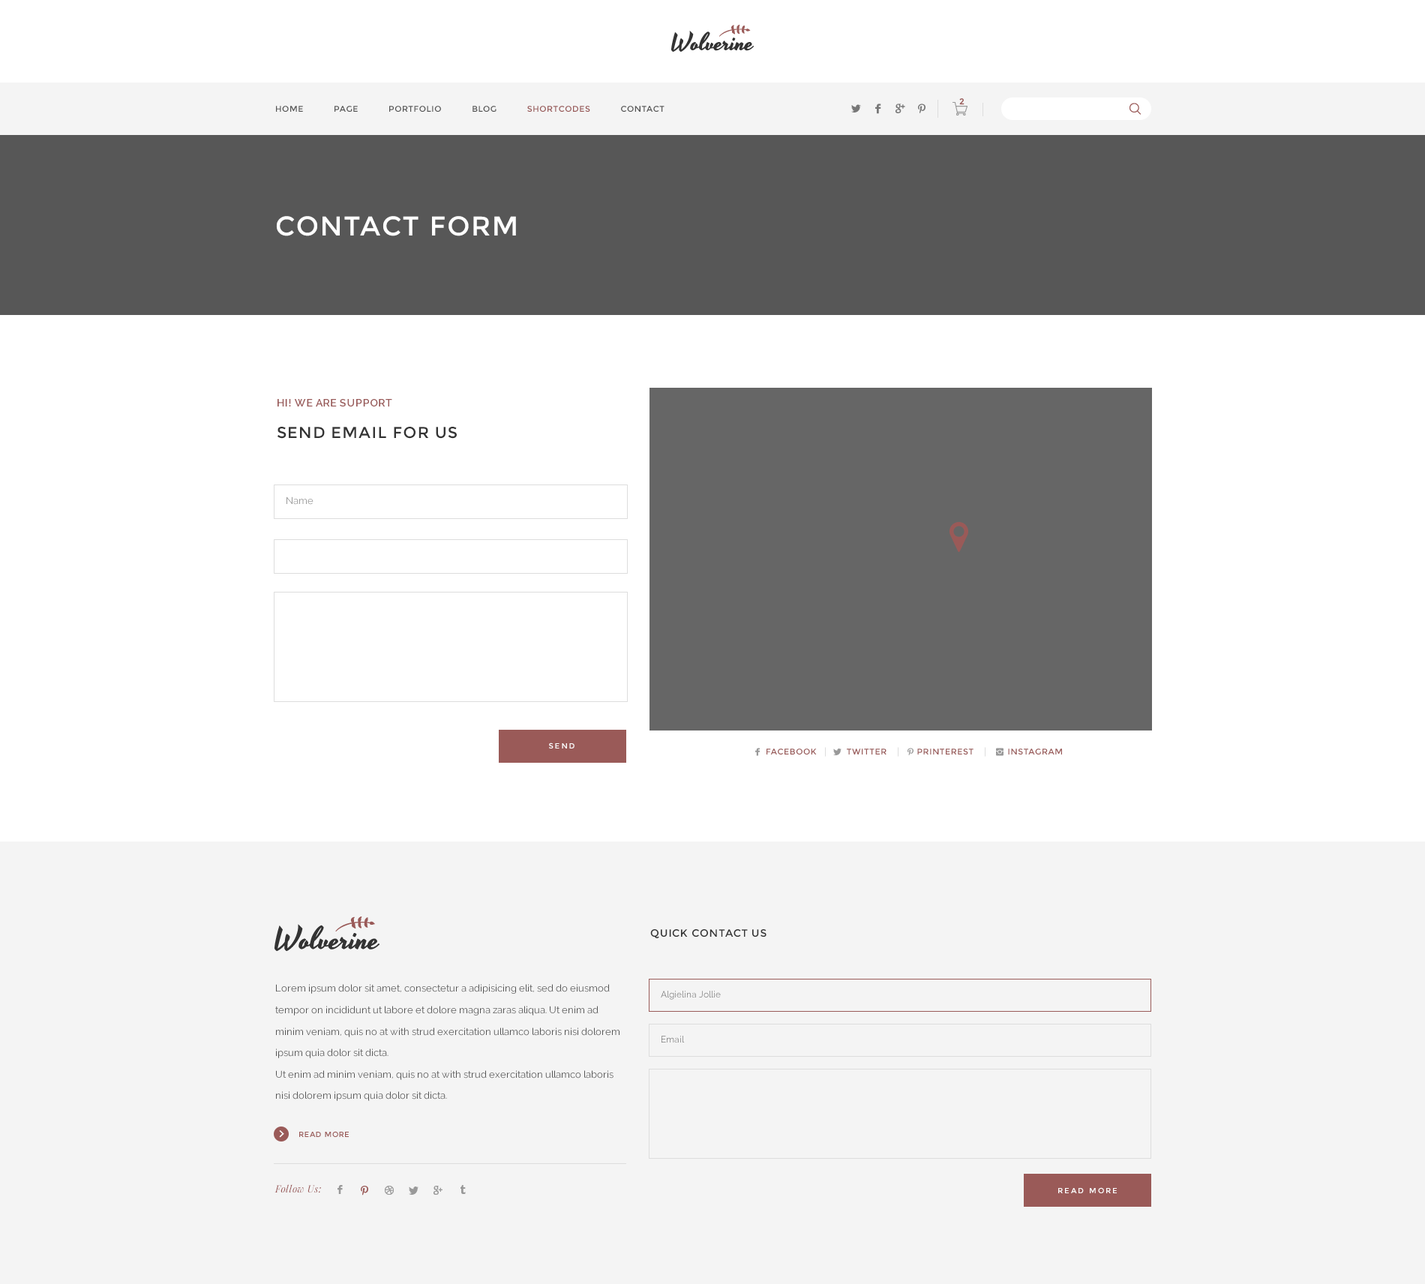
<style>
.page{position:relative;width:1425px;height:1284px;background:#f4f4f4}
.page>*{position:absolute;margin:0}
.t1{font:8.2px "Montserrat-Regular";color:#9a5a58;font-weight:bold}
.t2{font:8.2px "Montserrat-Regular";letter-spacing:0.05em;color:#535353}
.t3{font:8.2px "Montserrat-Regular";letter-spacing:0.05em;color:#995958}
.t4{font:27px "Montserrat-Regular";letter-spacing:0.05em;color:#ffffff}
.t5{font:10.5px "Raleway-SemiBold";letter-spacing:0.05em;color:#995958}
.t6{font:15.8px "Montserrat-Regular";letter-spacing:0.05em;color:#333333}
.t7{font:9.8px "Raleway-Regular";color:#999999}
.t8{font:7.5px "Montserrat-Regular";letter-spacing:0.2em;color:#ffffff}
.t9{font:10.5px "Montserrat-Regular";letter-spacing:0.05em;color:#333333}
.t10{font:9.8px/21.5px "Raleway-Regular";color:#545454}
.t11{font:9px "Raleway-Regular";color:#777777}
.t12{font:7.5px "Montserrat-Regular";letter-spacing:0.05em;color:#9a5a58}
.t13{font:9.8px "PlayfairDisplay-Italic";letter-spacing:0.04em;color:#995958}
</style>
<div class="page">
<p class="t1" style="left:959px;top:98px;width:5px;height:7px">2</p>
<p class="t2" style="left:276px;top:106px;width:388px;height:6px">HOME      PAGE      PORTFOLIO      BLOG      <span class="t3">SHORTCODES</span>      CONTACT</p>
<p class="t4" style="left:276px;top:216px;width:240px;height:20px">CONTACT FORM</p>
<p class="t5" style="left:278px;top:399px;width:114px;height:7px">HI! WE ARE SUPPORT</p>
<p class="t6" style="left:277px;top:427px;width:180px;height:12px">SEND EMAIL FOR US</p>
<p class="t7" style="left:286px;top:496px;width:28px;height:9px">Name</p>
<p class="t8" style="left:549px;top:742px;width:25px;height:6px">SEND</p>
<p class="t3" style="left:766px;top:748px;width:296px;height:6px">FACEBOOK        TWITTER        PRINTEREST         INSTAGRAM</p>
<p class="t9" style="left:650px;top:929px;width:116px;height:9px">QUICK CONTACT US</p>
<p class="t10" style="left:275px;top:984px;width:345px;height:117px">Lorem ipsum dolor sit amet, consectetur a adipisicing elit, sed do eiusmod tempor on incididunt ut labore et dolore magna zaras aliqua. Ut enim ad minim veniam, quis no at with strud exercitation ullamco laboris nisi dolorem ipsum quia dolor sit dicta. <br>Ut enim ad minim veniam, quis no at with strud exercitation ullamco laboris nisi dolorem ipsum quia dolor sit dicta.</p>
<p class="t11" style="left:661px;top:991px;width:60px;height:9px">Algielina Jollie</p>
<p class="t11" style="left:662px;top:1036px;width:23px;height:6px">Email</p>
<p class="t12" style="left:299px;top:1131px;width:50px;height:6px">READ MORE</p>
<p class="t13" style="left:274px;top:1184px;width:47px;height:9px">Follow Us:</p>
<p class="t8" style="left:1058px;top:1187px;width:59px;height:6px">READ MORE</p>
</div>
